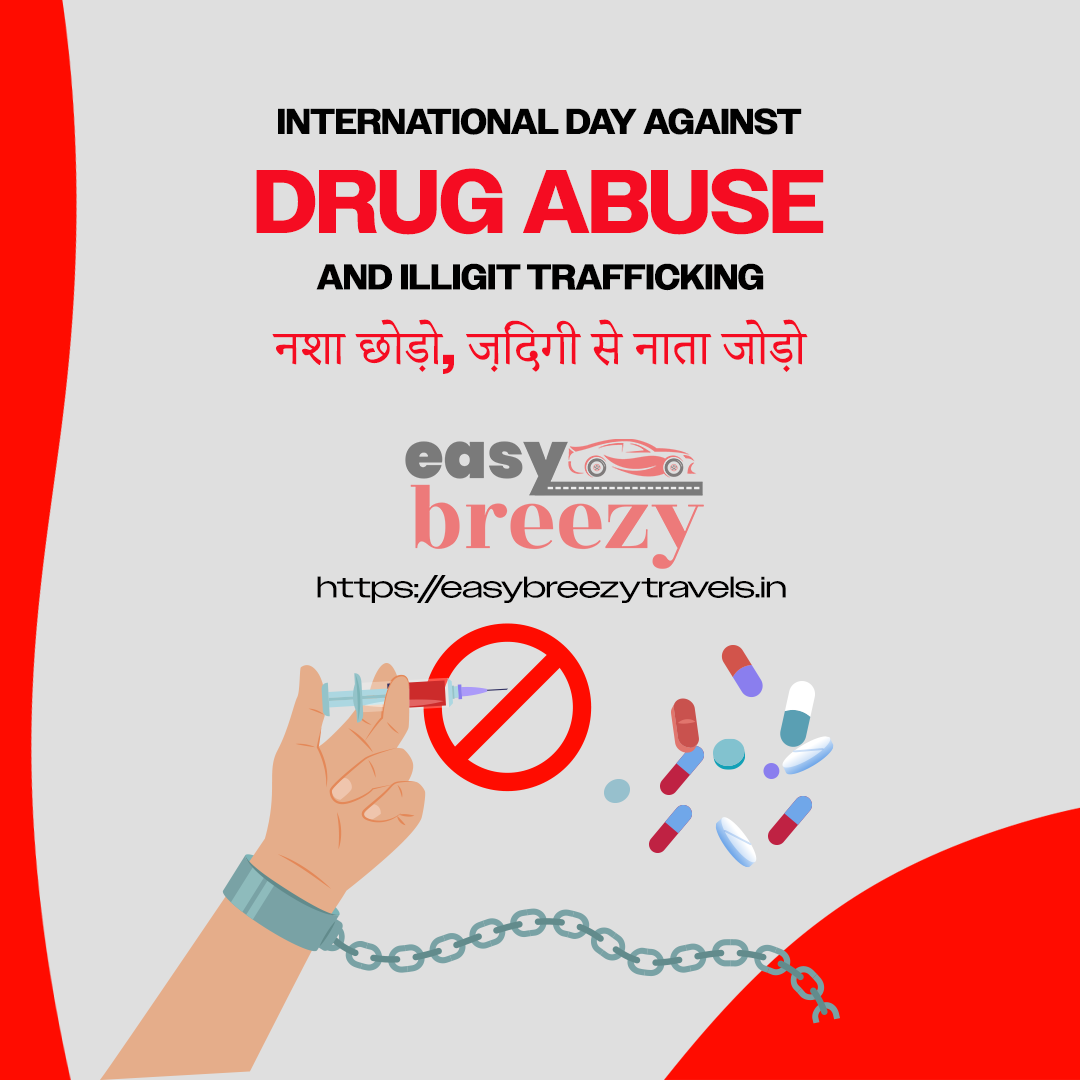
<style>
.page{position:relative;width:1080px;height:1080px;background:#dfdfdf}
.page>*{position:absolute;margin:0}
.t1{font:36px "Owners-Bold";color:#010101;text-transform:uppercase}
.t2{font:90px "Owners-Bold";color:#f50c22;text-transform:uppercase}
.t3{font:36px "Owners-Bold";color:#010000;text-transform:uppercase}
.t4{font:60px "AdobeDevanagari-Regular";color:#f50c22;text-transform:uppercase}
.t5{font:60px "Owners-Bold";color:#f50c22;text-transform:uppercase}
.t6{font:30px "OwnersXWide-Regular";color:#010000}
</style>
<div class="page">
<p class="t1" style="left:278px;top:108px;width:524px;height:27px">InTERNATIONAL DAY AGAINST</p>
<p class="t2" style="left:256px;top:168px;width:568px;height:67px">DRUG ABUSE</p>
<p class="t3" style="left:316px;top:263px;width:448px;height:28px">AND ILLIGIT TRAFFICKING</p>
<p class="t4" style="left:272px;top:319px;width:536px;height:55px">नशा छोड़ो<span class="t5">, </span>ज़िंदगी से नाता जोड़ो</p>
<p class="t6" style="left:317px;top:575px;width:469px;height:28px">https://easybreezytravels.in</p>
</div>
